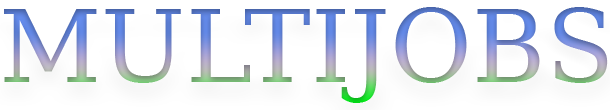
<style>
.page{position:relative;width:610px;height:110px;background:#ffffff}
.page>*{position:absolute;margin:0}
.t1{font:100px "DejaVuSerif"}
</style>
<div class="page">
<p class="t1" style="left:4px;top:7px;width:604px;height:96px">MULTIJOBS</p>
</div>
